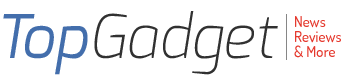
<style>
.page{position:relative;width:344px;height:84px;background:#ffffff}
.page>*{position:absolute;margin:0}
.t1{font:60px "Exo-ExtraLightItalic";color:#313131}
.t2{font:60px "Exo-Italic";color:#436eac}
.t3{font:15px/15px "Dosis-Medium";color:#e53a2f}
</style>
<div class="page">
<p class="t1" style="left:3px;top:11px;width:275px;height:64px"><span class="t2">Top</span>Gadget</p>
<p class="t3" style="left:294px;top:16px;width:47px;height:42px">News<br>Reviews<br>&amp; More</p>
</div>
